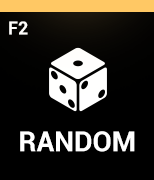
<style>
.page{position:relative;width:154px;height:180px;background:#000000}
.page>*{position:absolute;margin:0}
.t1{font:18px "Roboto-Bold";color:#ffffff}
.t2{font:28px "Roboto-Bold";color:#ffffff}
</style>
<div class="page">
<p class="t1" style="left:9px;top:21px;width:19px;height:14px">F2</p>
<p class="t2" style="left:20px;top:131px;width:115px;height:21px">RANDOM</p>
</div>
